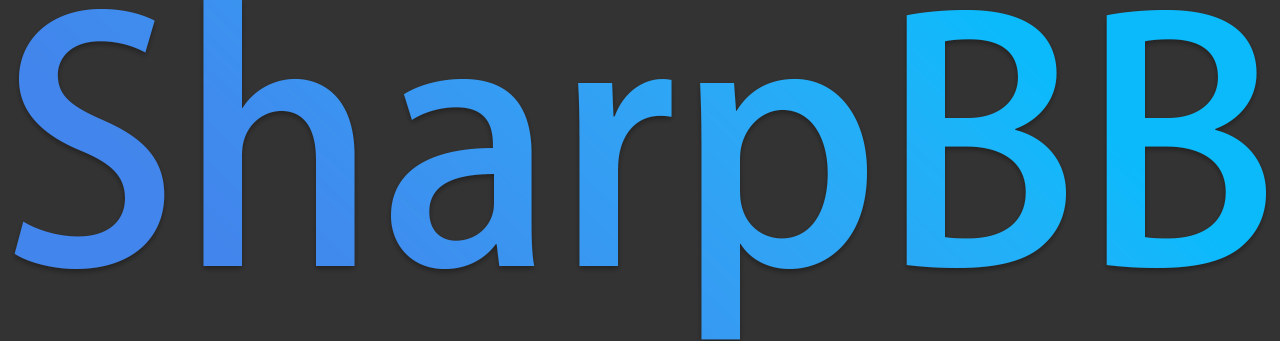
<style>
.page{position:relative;width:1280px;height:341px;background:#333333}
.page>*{position:absolute;margin:0}
.t1{font:332px "AdobeHeitiStd-Regular"}
</style>
<div class="page">
<p class="t1" style="left:14px;top:0px;width:1252px;height:340px">SharpBB</p>
</div>
